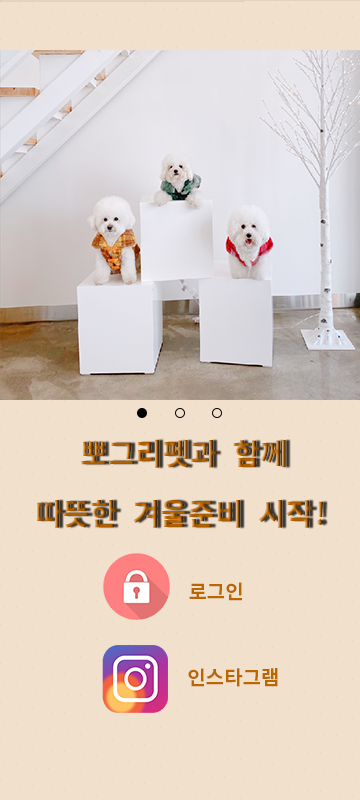
<style>
.page{position:relative;width:360px;height:800px;background:#f1e0cc}
.page>*{position:absolute;margin:0}
.t1{font:30px/60px "NotoSansMonoCJKkr-Bold"}
.t2{font:20px "NotoSansMonoCJKkr-Bold";color:#bb6600}
</style>
<div class="page">
<p class="t1" style="left:37px;top:439px;width:286px;height:89px">뽀그리펫과 함께 <br>따뜻한 겨울준비 시작!</p>
<p class="t2" style="left:189px;top:582px;width:53px;height:19px">로그인</p>
<p class="t2" style="left:188px;top:668px;width:90px;height:19px">인스타그램</p>
</div>
